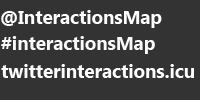
<style>
.page{position:relative;width:200px;height:100px;background:#333333}
.page>*{position:absolute;margin:0}
.t1{font:18.7px "MicrosoftNewTaiLue-Bold";color:#ffffff}
.t2{font:18.7px "MicrosoftNewTaiLue-Bold";color:#fafafa}
.t3{font:18.7px "MicrosoftNewTaiLue-Bold";color:#fefefe}
</style>
<div class="page">
<p class="t1" style="left:1px;top:10px;width:161px;height:18px">@InteractionsMap</p>
<p class="t2" style="left:1px;top:36px;width:154px;height:18px">#interactionsMap</p>
<p class="t3" style="left:1px;top:64px;width:193px;height:14px">twitterinteractions.icu</p>
</div>
